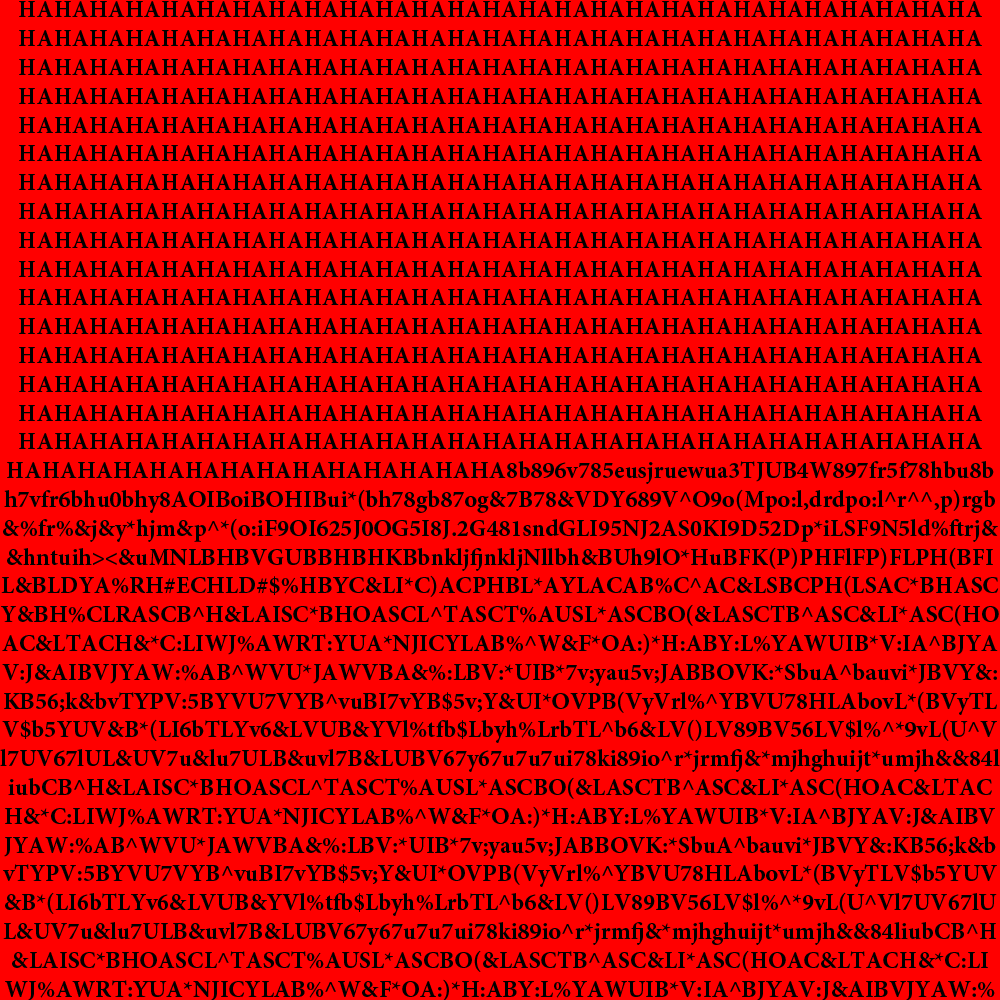
<style>
.page{position:relative;width:1000px;height:1000px;background:#ff0000}
.page>*{position:absolute;margin:0}
.t1{font:24px "MinionPro-Bold";color:#000000}
</style>
<div class="page">
<p class="t1" style="left:0px;top:1px;width:1000px;height:1000px;text-align:center">HAHAHAHAHAHAHAHAHAHAHAHAHAHAHAHAHAHAHAHAHAHAHAHAHAHAHA<br>HAHAHAHAHAHAHAHAHAHAHAHAHAHAHAHAHAHAHAHAHAHAHAHAHAHAHA<br>HAHAHAHAHAHAHAHAHAHAHAHAHAHAHAHAHAHAHAHAHAHAHAHAHAHAHA<br>HAHAHAHAHAHAHAHAHAHAHAHAHAHAHAHAHAHAHAHAHAHAHAHAHAHAHA<br>HAHAHAHAHAHAHAHAHAHAHAHAHAHAHAHAHAHAHAHAHAHAHAHAHAHAHA<br>HAHAHAHAHAHAHAHAHAHAHAHAHAHAHAHAHAHAHAHAHAHAHAHAHAHAHA<br>HAHAHAHAHAHAHAHAHAHAHAHAHAHAHAHAHAHAHAHAHAHAHAHAHAHAHA<br>HAHAHAHAHAHAHAHAHAHAHAHAHAHAHAHAHAHAHAHAHAHAHAHAHAHAHA<br>HAHAHAHAHAHAHAHAHAHAHAHAHAHAHAHAHAHAHAHAHAHAHAHAHAHAHA<br>HAHAHAHAHAHAHAHAHAHAHAHAHAHAHAHAHAHAHAHAHAHAHAHAHAHAHA<br>HAHAHAHAHAHAHAHAHAHAHAHAHAHAHAHAHAHAHAHAHAHAHAHAHAHAHA<br>HAHAHAHAHAHAHAHAHAHAHAHAHAHAHAHAHAHAHAHAHAHAHAHAHAHAHA<br>HAHAHAHAHAHAHAHAHAHAHAHAHAHAHAHAHAHAHAHAHAHAHAHAHAHAHA<br>HAHAHAHAHAHAHAHAHAHAHAHAHAHAHAHAHAHAHAHAHAHAHAHAHAHAHA<br>HAHAHAHAHAHAHAHAHAHAHAHAHAHAHAHAHAHAHAHAHAHAHAHAHAHAHA<br>HAHAHAHAHAHAHAHAHAHAHAHAHAHAHAHAHAHAHAHAHAHAHAHAHAHAHA<br>HAHAHAHAHAHAHAHAHAHAHAHAHAHA8b896v785eusjruewua3TJUB4W897fr5f78hbu8bh7vfr6bhu0bhy8AOIBoiBOHIBui*(bh78gb87og&amp;7B78&amp;VDY689V^O9o(Mpo:l,drdpo:l^r^^,p)rgb&amp;%fr%&amp;j&amp;y*hjm&amp;p^*(o:iF9OI625J0OG5I8J.2G481sndGLI95NJ2AS0KI9D52Dp*iLSF9N5ld%ftrj&amp;&amp;hntuih&gt;&lt;&amp;uMNLBHBVGUBBHBHKBbnkljfjnkljNllbh&amp;BUh9lO*HuBFK(P)PHFlFP)FLPH(BFIL&amp;BLDYA%RH#ECHLD#$%HBYC&amp;LI*C)ACPHBL*AYLACAB%C^AC&amp;LSBCPH(LSAC*BHASCY&amp;BH%CLRASCB^H&amp;LAISC*BHOASCL^TASCT%AUSL*ASCBO(&amp;LASCTB^ASC&amp;LI*ASC(HOAC&amp;LTACH&amp;*C:LIWJ%AWRT:YUA*NJICYLAB%^W&amp;F*OA:)*H:ABY:L%YAWUIB*V:IA^BJYAV:J&amp;AIBVJYAW:%AB^WVU*JAWVBA&amp;%:LBV:*UIB*7v;yau5v;JABBOVK:*SbuA^bauvi*JBVY&amp;:KB56;k&amp;bvTYPV:5BYVU7VYB^vuBI7vYB$5v;Y&amp;UI*OVPB(VyVrl%^YBVU78HLAbovL*(BVyTLV$b5YUV&amp;B*(LI6bTLYv6&amp;LVUB&amp;YVl%tfb$Lbyh%LrbTL^b6&amp;LV()LV89BV56LV$l%^*9vL(U^Vl7UV67lUL&amp;UV7u&amp;lu7ULB&amp;uvl7B&amp;LUBV67y67u7u7ui78ki89io^r*jrmfj&amp;*mjhghuijt*umjh&amp;&amp;84liubCB^H&amp;LAISC*BHOASCL^TASCT%AUSL*ASCBO(&amp;LASCTB^ASC&amp;LI*ASC(HOAC&amp;LTACH&amp;*C:LIWJ%AWRT:YUA*NJICYLAB%^W&amp;F*OA:)*H:ABY:L%YAWUIB*V:IA^BJYAV:J&amp;AIBVJYAW:%AB^WVU*JAWVBA&amp;%:LBV:*UIB*7v;yau5v;JABBOVK:*SbuA^bauvi*JBVY&amp;:KB56;k&amp;bvTYPV:5BYVU7VYB^vuBI7vYB$5v;Y&amp;UI*OVPB(VyVrl%^YBVU78HLAbovL*(BVyTLV$b5YUV&amp;B*(LI6bTLYv6&amp;LVUB&amp;YVl%tfb$Lbyh%LrbTL^b6&amp;LV()LV89BV56LV$l%^*9vL(U^Vl7UV67lUL&amp;UV7u&amp;lu7ULB&amp;uvl7B&amp;LUBV67y67u7u7ui78ki89io^r*jrmfj&amp;*mjhghuijt*umjh&amp;&amp;84liubCB^H&amp;LAISC*BHOASCL^TASCT%AUSL*ASCBO(&amp;LASCTB^ASC&amp;LI*ASC(HOAC&amp;LTACH&amp;*C:LIWJ%AWRT:YUA*NJICYLAB%^W&amp;F*OA:)*H:ABY:L%YAWUIB*V:IA^BJYAV:J&amp;AIBVJYAW:%AB^WVU*JAWVBA&amp;%:LBV:*UIB*7v;yau5v;JABBOVK:*SbuA^bauvi*JBVY&amp;:KB56;k&amp;bvTYPV:5BYVU7VYB^vuBI7vYB$5v;Y&amp;UI*OVPB(VyVrl%^YBVU78HLAbovL*(BVyTLV$b5YUV&amp;B*(LI6bTLYv6&amp;LVUB&amp;YVl%tfb$Lbyh%LrbTL^b6&amp;LV()LV89BV56LV$l%^*9vL(U^Vl7UV67lUL&amp;UV7u&amp;lu7ULB&amp;uvl7B&amp;LUBV67y67u7u7ui78ki89io^r*jrmfj&amp;*mjhghuijt*umjh&amp;&amp;84liub</p>
</div>
